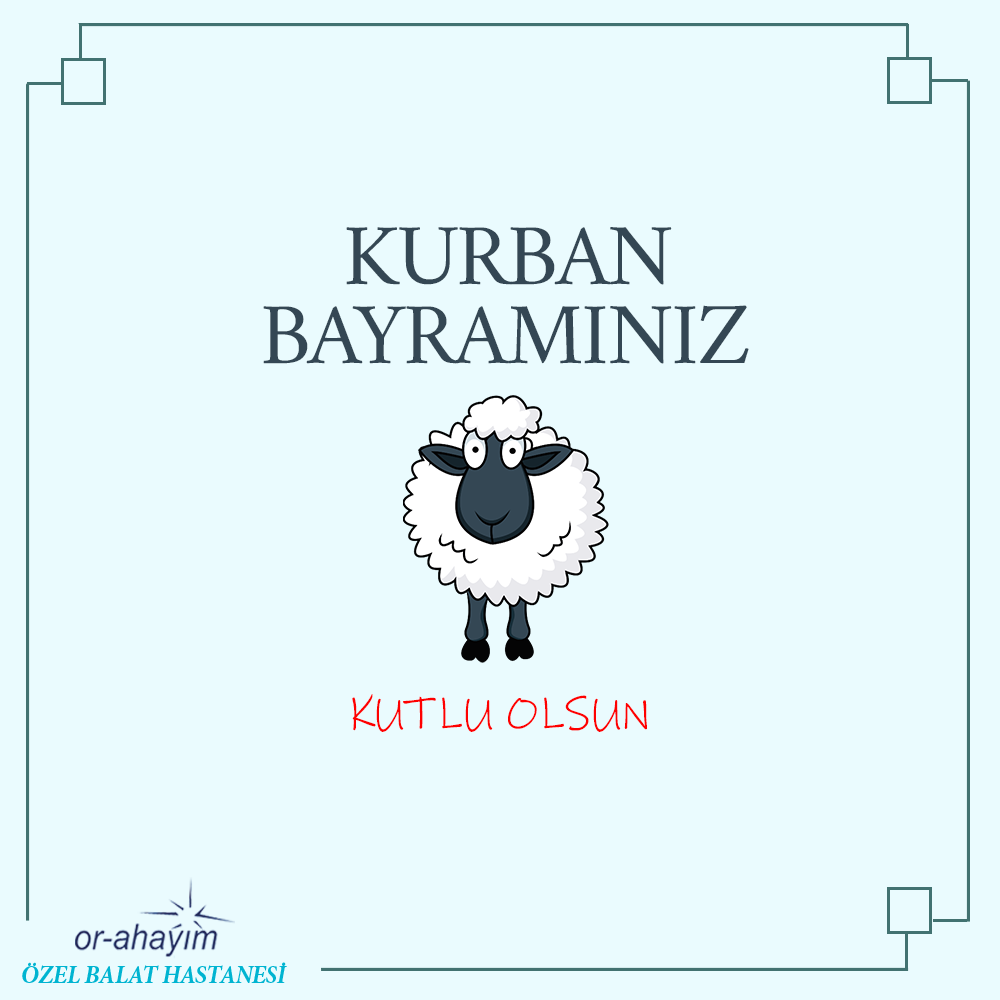
<style>
.page{position:relative;width:1000px;height:1000px;background:#eafbfe}
.page>*{position:absolute;margin:0}
.t1{font:87.7px "Amiri-Regular";letter-spacing:-0.025em;color:#344754}
.t2{font:48px "InkFree";letter-spacing:-0.025em;color:#fe0000}
</style>
<div class="page">
<p class="t1" style="left:346px;top:227px;width:326px;height:58px">KURBAN</p>
<p class="t1" style="left:263px;top:305px;width:486px;height:59px">BAYRAMINIZ</p>
<p class="t2" style="left:352px;top:694px;width:295px;height:38px">KUTLU OLSUN</p>
</div>
